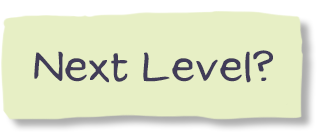
<style>
.page{position:relative;width:317px;height:132px;background:#e7efc5}
.page>*{position:absolute;margin:0}
.t1{font:40px "TidyHand";color:#413c58;font-weight:bold}
</style>
<div class="page">
<p class="t1" style="left:34px;top:50px;width:239px;height:33px">Next Level?</p>
</div>
